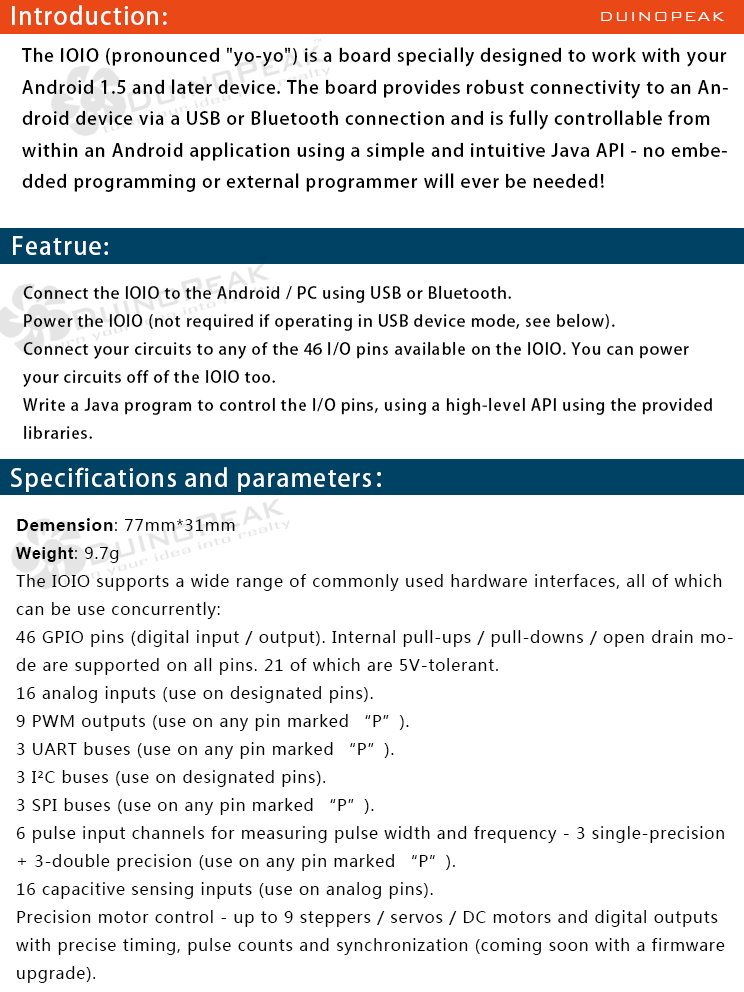
<style>
.page{position:relative;width:744px;height:992px;background:#ffffff}
.page>*{position:absolute;margin:0}
.t1{font:24px "AdobeHeitiStd-Regular";letter-spacing:0.05em;color:#ffffff}
.t2{font:18px "BankGothicBT-Light";letter-spacing:0.05em;color:#ffffff}
.t3{font:18px "AdobeHeitiStd-Regular";letter-spacing:0.05em;color:#000000}
.t4{font:16px "AdobeHeitiStd-Regular";letter-spacing:0.05em;color:#000000}
.t5{font:16px "MicrosoftYaHei";letter-spacing:0.05em;color:#000000}
.t6{font:16px "MicrosoftYaHei-Bold";letter-spacing:0.05em;color:#000000}
.t7{font:16px "Arial-BoldMT";letter-spacing:0.05em;color:#000000}
</style>
<div class="page">
<p class="t1" style="left:12px;top:5px;width:155px;height:20px">Introduction:</p>
<p class="t2" style="left:601px;top:12px;width:124px;height:9px">DUINOPEAK</p>
<p class="t3" style="left:21px;top:47px;width:707px;height:145px">The IOIO (pronounced "yo-yo") is a board specially designed to work with your <br>Android 1.5 and later device. The board provides robust connectivity to an An-<br>droid device via a USB or Bluetooth connection and is fully controllable from <br>within an Android application using a simple and intuitive Java API - no embe-<br>dded programming or external programmer will ever be needed!</p>
<p class="t1" style="left:13px;top:236px;width:95px;height:19px">Featrue:</p>
<p class="t4" style="left:23px;top:285px;width:689px;height:154px">Connect the IOIO to the Android / PC using USB or Bluetooth.<br>Power the IOIO (not required if operating in USB device mode, see below).<br>Connect your circuits to any of the 46 I/O pins available on the IOIO. You can power<br>your circuits off of the IOIO too.<br>Write a Java program to control the I/O pins, using a high-level API using the provided<br>libraries.</p>
<p class="t1" style="left:11px;top:467px;width:370px;height:25px">Specifications and parameters：</p>
<p class="t5" style="left:16px;top:518px;width:717px;height:465px"><span class="t6">Demension</span>: 77mm*31mm<br><span class="t7">Weight</span>: 9.7g<br>The IOIO supports a wide range of commonly used hardware interfaces, all of which <br>can be use concurrently:<br>46 GPIO pins (digital input / output). Internal pull-ups / pull-downs / open drain mo-<br>de are supported on all pins. 21 of which are 5V-tolerant.<br>16 analog inputs (use on designated pins).<br>9 PWM outputs (use on any pin marked “P”).<br>3 UART buses (use on any pin marked “P”).<br>3 I²C buses (use on designated pins).<br>3 SPI buses (use on any pin marked “P”).<br>6 pulse input channels for measuring pulse width and frequency - 3 single-precision <br>+ 3-double precision (use on any pin marked “P”).<br>16 capacitive sensing inputs (use on analog pins).<br>Precision motor control - up to 9 steppers / servos / DC motors and digital outputs <br>with precise timing, pulse counts and synchronization (coming soon with a firmware <br>upgrade).</p>
</div>
